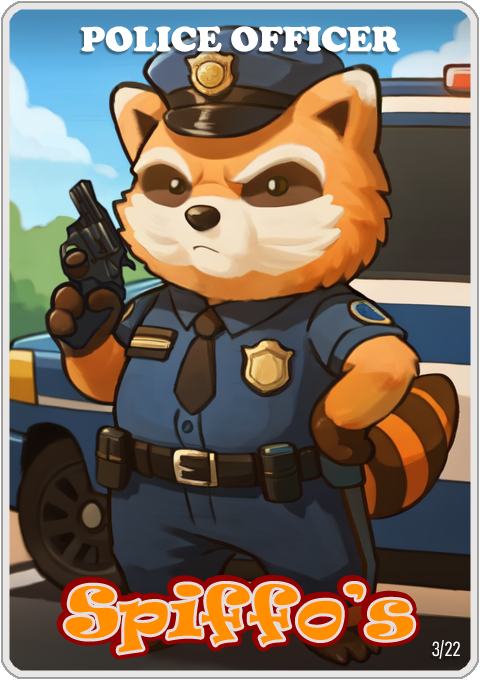
<style>
.page{position:relative;width:480px;height:680px}
.page>*{position:absolute;margin:0}
.t1{font:36px "CooperBlack";color:#ffffff}
.t2{font:65px "Ravie";color:#ff8e00}
.t3{font:20px "Bahnschrift-LightCondensed";color:#ffffff}
</style>
<div class="page">
<p class="t1" style="left:80px;top:26px;width:320px;height:26px">POLICE OFFICER</p>
<p class="t2" style="left:65px;top:584px;width:349px;height:69px">Spiffo’s</p>
<p class="t3" style="left:432px;top:640px;width:28px;height:19px">3/22</p>
</div>
